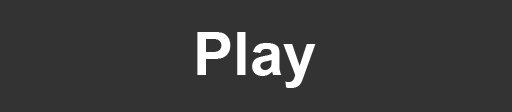
<style>
.page{position:relative;width:512px;height:112px;background:#333333}
.page>*{position:absolute;margin:0}
.t1{font:60px "Arial-BoldMT";color:#ffffff}
</style>
<div class="page">
<p class="t1" style="left:197px;top:32px;width:119px;height:56px">Play</p>
</div>
